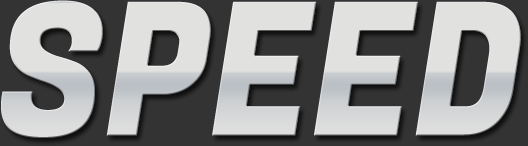
<style>
.page{position:relative;width:528px;height:146px;background:#333333}
.page>*{position:absolute;margin:0}
.t1{font:185.2px "FugazOne-Regular";color:#dfdfdf;scale:0.89 1}
</style>
<div class="page">
<p class="t1" style="left:1px;top:0px;width:520px;height:138px">SPEED</p>
</div>
